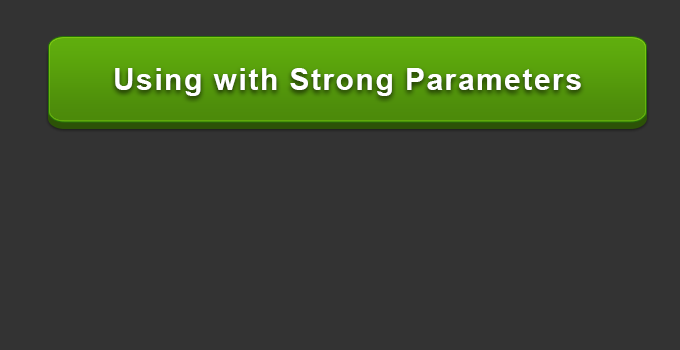
<style>
.page{position:relative;width:680px;height:350px;background:#333333}
.page>*{position:absolute;margin:0}
.t1{font:30px "Arial-BoldMT";letter-spacing:0.05em;color:#ffffff}
</style>
<div class="page">
<p class="t1" style="left:115px;top:68px;width:466px;height:28px">Using with Strong Parameters</p>
</div>
